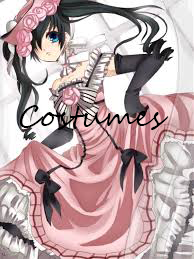
<style>
.page{position:relative;width:194px;height:259px}
.page>*{position:absolute;margin:0}
.t1{font:30px "SegoeScript";color:#000000}
</style>
<div class="page">
<p class="t1" style="left:19px;top:105px;width:150px;height:25px">Costumes</p>
</div>
